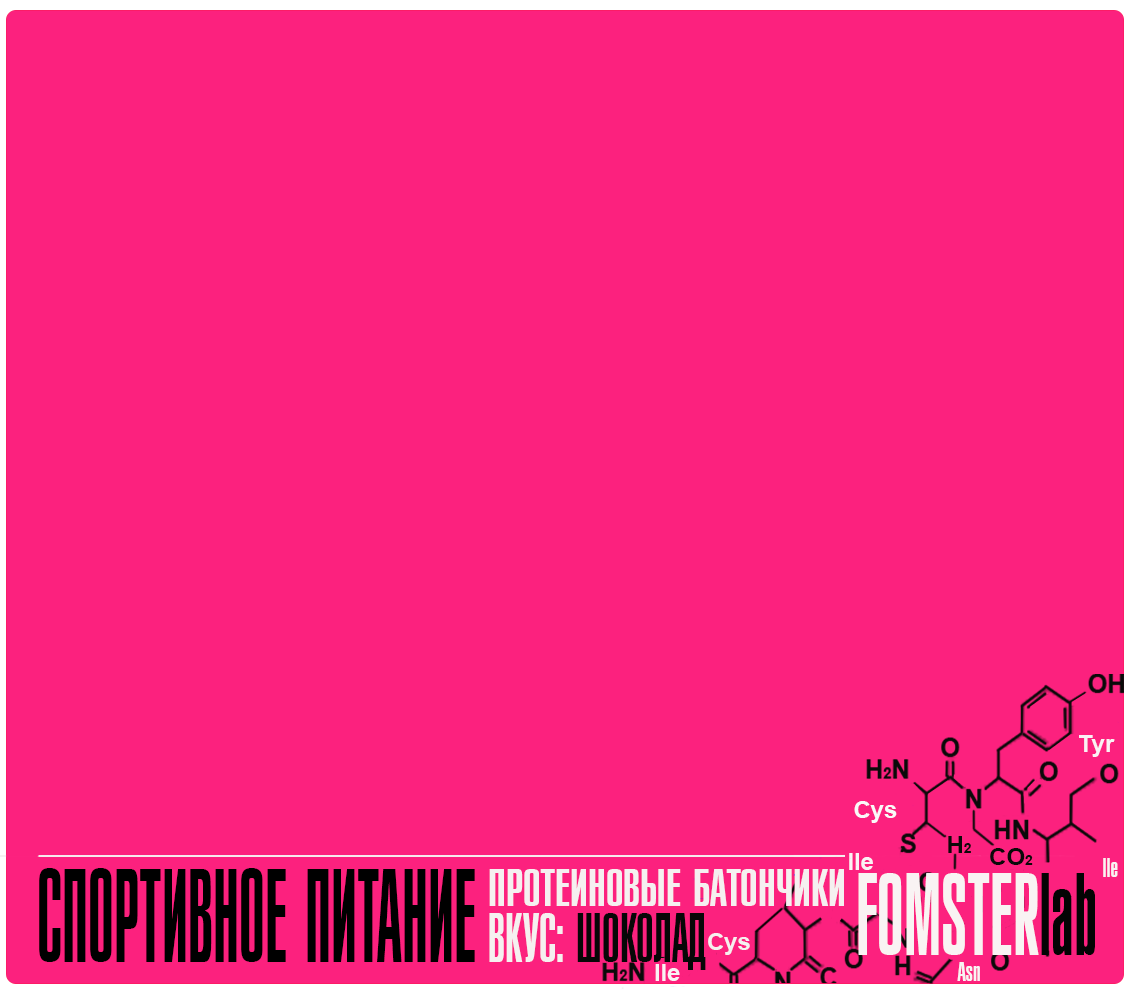
<style>
.page{position:relative;width:1134px;height:992px;background:#fc217e}
.page>*{position:absolute;margin:0}
.t1{font:24px "Arial-BoldMT";color:#f9f2f5}
.t2{font:24px "Arial-BoldMT";color:#f9f9f9}
.t3{font:24px "Arial-BoldMT";color:#0a0a09}
.t4{font:14px "Arial-BoldMT";color:#0a0a09}
.t5{font:24px "Arial-BoldMT";color:#faf2f5}
.t6{font:120.2px "ARubricaXtCn";color:#000000;scale:0.59 1}
.t7{font:48px "ARubricaXtCn";color:#f5f0f0}
.t8{font:24px "ARubricaXtCn";color:#f9f3f3}
.t9{font:105.5px "ARubricaXtCn";color:#f9f3f3;scale:0.68 1}
.t10{font:105.5px "ARubricaXtCn";color:#040404;scale:0.68 1}
.t11{font:63.1px "ARubricaXtCn";color:#070707;scale:0.76 1}
.t12{font:63.1px "ARubricaXtCn";color:#f5f0f0;scale:0.76 1}
.t13{font:24px "Arial-BoldMT";color:#f5f0f0}
</style>
<div class="page">
<p class="t1" style="left:1079px;top:735px;width:36px;height:22px">Tyr</p>
<p class="t2" style="left:854px;top:801px;width:43px;height:22px">Cys</p>
<p class="t3" style="left:948px;top:836px;width:23px;height:17px">H<span class="t4">2</span></p>
<p class="t5" style="left:849px;top:853px;width:24px;height:17px">lle</p>
<p class="t3" style="left:990px;top:848px;width:43px;height:17px">CO<span class="t4">2</span></p>
<p class="t6" style="left:39px;top:868px;width:436px;height:94px">СПОРТИВНОЕ ПИТАНИЕ</p>
<p class="t7" style="left:489px;top:869px;width:355px;height:37px">ПРОТЕИНОВЫЕ БАТОНЧИКИ</p>
<p class="t8" style="left:1103px;top:858px;width:15px;height:19px">lle</p>
<p class="t9" style="left:858px;top:873px;width:237px;height:82px">FOMSTER<span class="t10">lab</span></p>
<p class="t11" style="left:489px;top:913px;width:217px;height:57px"><span class="t12">ВКУС: </span>ШОКОЛАД</p>
<p class="t13" style="left:708px;top:933px;width:42px;height:22px">Cys</p>
<p class="t1" style="left:655px;top:964px;width:25px;height:17px">lle</p>
<p class="t8" style="left:957px;top:962px;width:23px;height:19px">Asn</p>
</div>
